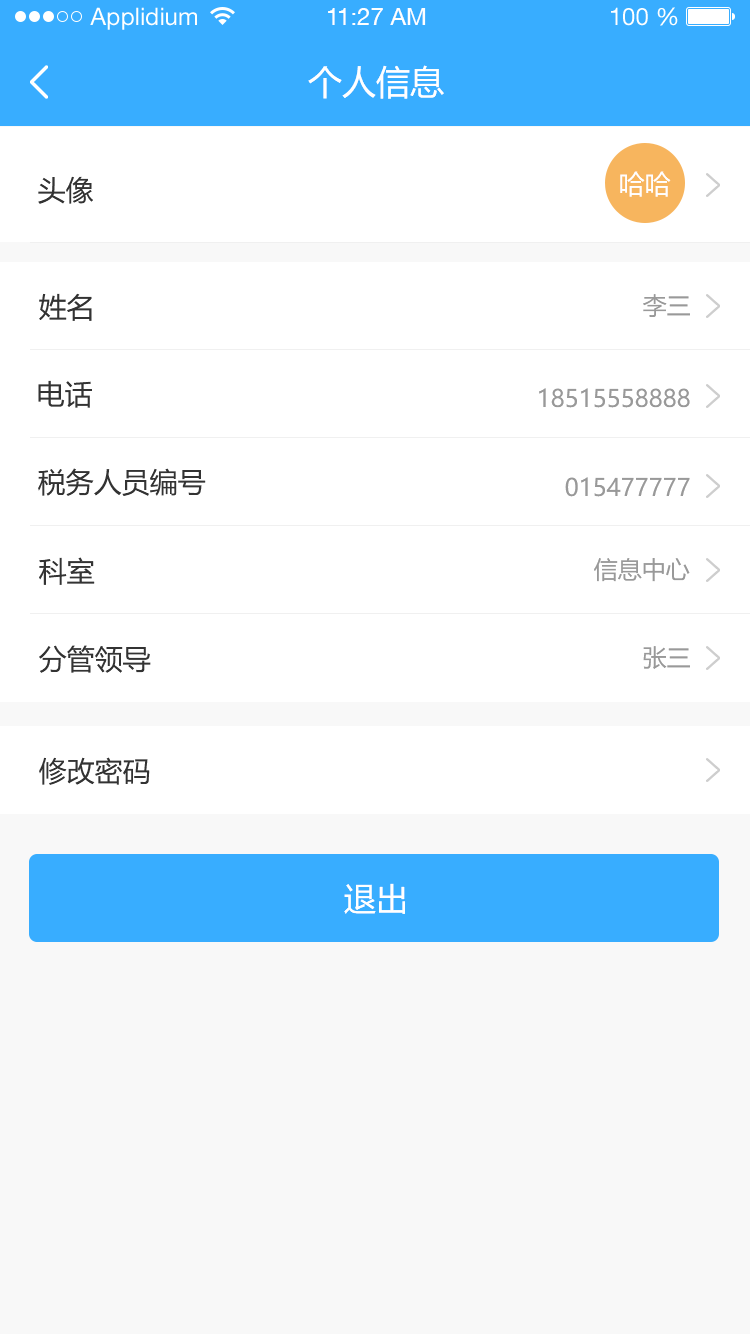
<style>
.page{position:relative;width:750px;height:1334px;background:#ffffff}
.page>*{position:absolute;margin:0}
.t1{font:24px "HelveticaNeueLTStd-Roman";color:#ffffff}
.t2{font:24px "HelveticaNeueCE-Roman";color:#ffffff}
.t3{font:34px "MicrosoftYaHei";color:#ffffff}
.t4{font:26px "MicrosoftYaHei";color:#fffefe}
.t5{font:28px "MicrosoftYaHei";color:#333333}
.t6{font:24px "MicrosoftYaHei";color:#999999}
.t7{font:32px "MicrosoftYaHei";color:#ffffff}
</style>
<div class="page">
<p class="t1" style="left:90px;top:7px;width:107px;height:23px">Applidium</p>
<p class="t2" style="left:328px;top:8px;width:98px;height:17px">11:27 AM</p>
<p class="t1" style="left:611px;top:7px;width:67px;height:19px">100 %</p>
<p class="t3" style="left:308px;top:65px;width:136px;height:34px">个人信息</p>
<p class="t4" style="left:620px;top:171px;width:51px;height:26px">哈哈</p>
<p class="t5" style="left:38px;top:176px;width:55px;height:28px">头像</p>
<p class="t5" style="left:39px;top:293px;width:53px;height:28px">姓名</p>
<p class="t6" style="left:643px;top:294px;width:47px;height:23px">李三</p>
<p class="t5" style="left:38px;top:380px;width:54px;height:28px">电话</p>
<p class="t6" style="left:539px;top:388px;width:151px;height:20px">18515558888</p>
<p class="t5" style="left:38px;top:468px;width:168px;height:28px">税务人员编号</p>
<p class="t6" style="left:565px;top:477px;width:125px;height:20px">015477777</p>
<p class="t5" style="left:39px;top:557px;width:56px;height:28px">科室</p>
<p class="t6" style="left:594px;top:558px;width:96px;height:24px">信息中心</p>
<p class="t5" style="left:39px;top:645px;width:112px;height:28px">分管领导</p>
<p class="t6" style="left:643px;top:646px;width:47px;height:23px">张三</p>
<p class="t5" style="left:39px;top:757px;width:111px;height:28px">修改密码</p>
<p class="t7" style="left:344px;top:883px;width:61px;height:31px">退出</p>
</div>
